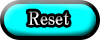
<style>
.page{position:relative;width:100px;height:40px}
.page>*{position:absolute;margin:0}
.t1{font:18px "HGPMinchoB";color:#ffffff}
</style>
<div class="page">
<p class="t1" style="left:28px;top:11px;width:41px;height:14px">Reset</p>
</div>
